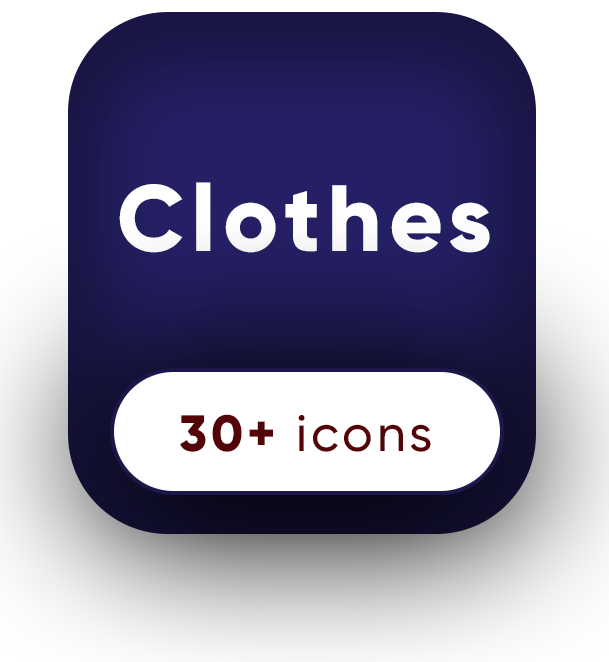
<style>
.page{position:relative;width:609px;height:662px;background:#ffffff}
.page>*{position:absolute;margin:0}
.t1{font:93.8px "Gilroy-ExtraBold";letter-spacing:0.075em;color:#fdfdfd}
.t2{font:50.9px "Gilroy-Medium";letter-spacing:0.075em;color:#540306}
.t3{font:50.9px "Gilroy-ExtraBold";letter-spacing:0.075em;color:#540306}
</style>
<div class="page">
<p class="t1" style="left:119px;top:182px;width:371px;height:71px">Clothes</p>
<p class="t2" style="left:180px;top:414px;width:251px;height:38px"><span class="t3">30+ </span>icons</p>
</div>
